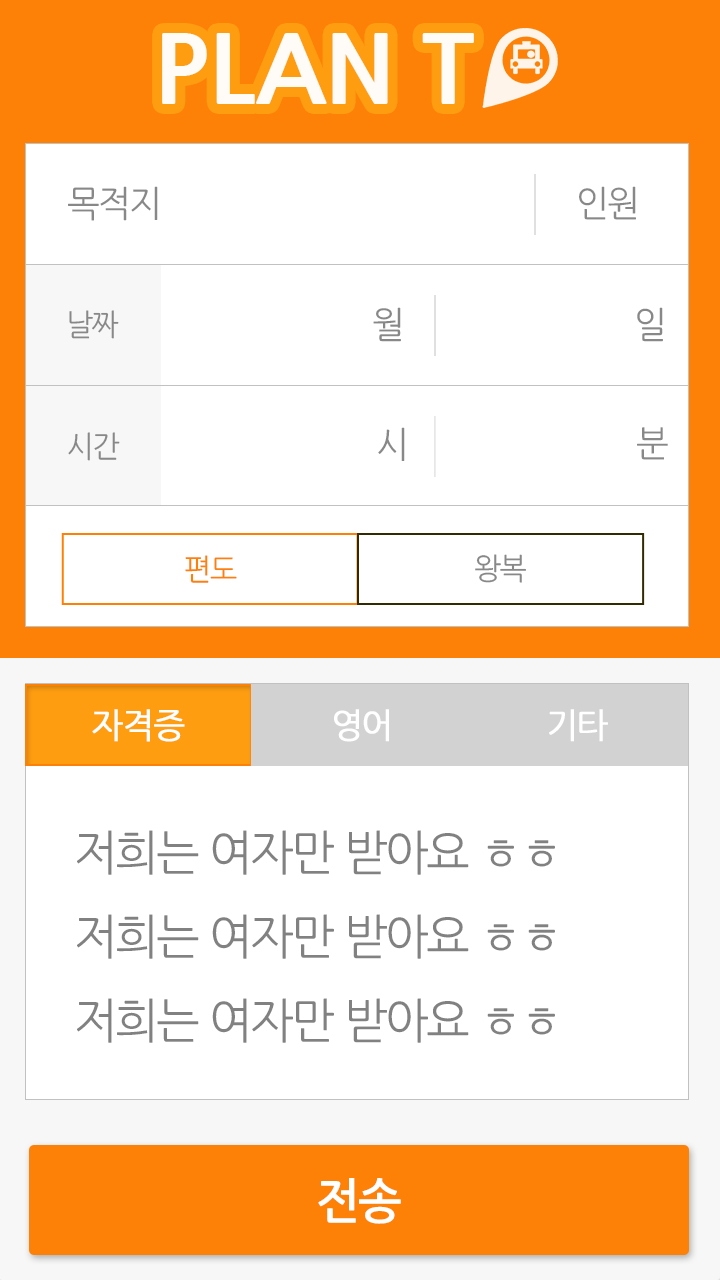
<style>
.page{position:relative;width:720px;height:1280px;background:#ffffff}
.page>*{position:absolute;margin:0}
.t1{font:96px "NanumGothicExtraBold";color:#fffbf7}
.t2{font:36px "NanumGothic";letter-spacing:-0.05em;color:#888888;scale:0.97 1}
.t3{font:30px "NanumGothic";letter-spacing:-0.05em;color:#888888;scale:0.97 1}
.t4{font:30px "NanumGothic";letter-spacing:-0.05em;color:#fd8107;scale:0.97 1}
.t5{font:34.2px "NanumGothic";letter-spacing:-0.05em;color:#fffefe;font-weight:bold}
.t6{font:34.2px "NanumGothic";letter-spacing:-0.05em;color:#ffffff;font-weight:bold}
.t7{font:48px "NanumGothic";letter-spacing:-0.05em;color:#818181;scale:0.97 1}
.t8{font:48px "NanumGothicBold";letter-spacing:-0.05em;color:#ffffff;scale:0.97 1}
</style>
<div class="page">
<p class="t1" style="left:162px;top:33px;width:312px;height:71px">PLAN T</p>
<p class="t2" style="left:68px;top:186px;width:90px;height:35px">목적지</p>
<p class="t2" style="left:579px;top:186px;width:57px;height:34px">인원</p>
<p class="t3" style="left:69px;top:310px;width:50px;height:29px">날짜</p>
<p class="t2" style="left:373px;top:307px;width:28px;height:35px">월</p>
<p class="t2" style="left:637px;top:307px;width:26px;height:35px">일</p>
<p class="t3" style="left:68px;top:432px;width:52px;height:29px">시간</p>
<p class="t2" style="left:378px;top:427px;width:27px;height:34px">시</p>
<p class="t2" style="left:637px;top:427px;width:31px;height:33px">분</p>
<p class="t4" style="left:185px;top:555px;width:52px;height:28px">편도</p>
<p class="t3" style="left:475px;top:554px;width:51px;height:29px">왕복</p>
<p class="t5" style="left:92px;top:709px;width:93px;height:33px">자격증</p>
<p class="t6" style="left:334px;top:709px;width:55px;height:33px">영어</p>
<p class="t6" style="left:549px;top:709px;width:59px;height:33px">기타</p>
<p class="t7" style="left:77px;top:830px;width:478px;height:213px">저희는 여자만 받아요 ㅎㅎ<br>저희는 여자만 받아요 ㅎㅎ<br>저희는 여자만 받아요 ㅎㅎ</p>
<p class="t8" style="left:318px;top:1178px;width:83px;height:46px">전송</p>
</div>
